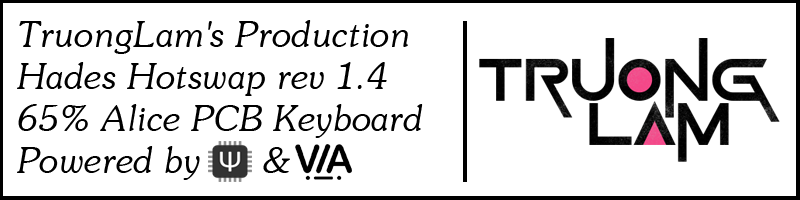
<style>
.page{position:relative;width:800px;height:200px;background:#ffffff}
.page>*{position:absolute;margin:0}
.t1{font:35px "UVNSaigonItalic";color:#000000}
</style>
<div class="page">
<p class="t1" style="left:17px;top:20px;width:406px;height:160px">TruongLam's Production<br>Hades Hotswap rev 1.4<br>65% Alice PCB Keyboard<br>Powered by      &amp;</p>
</div>
